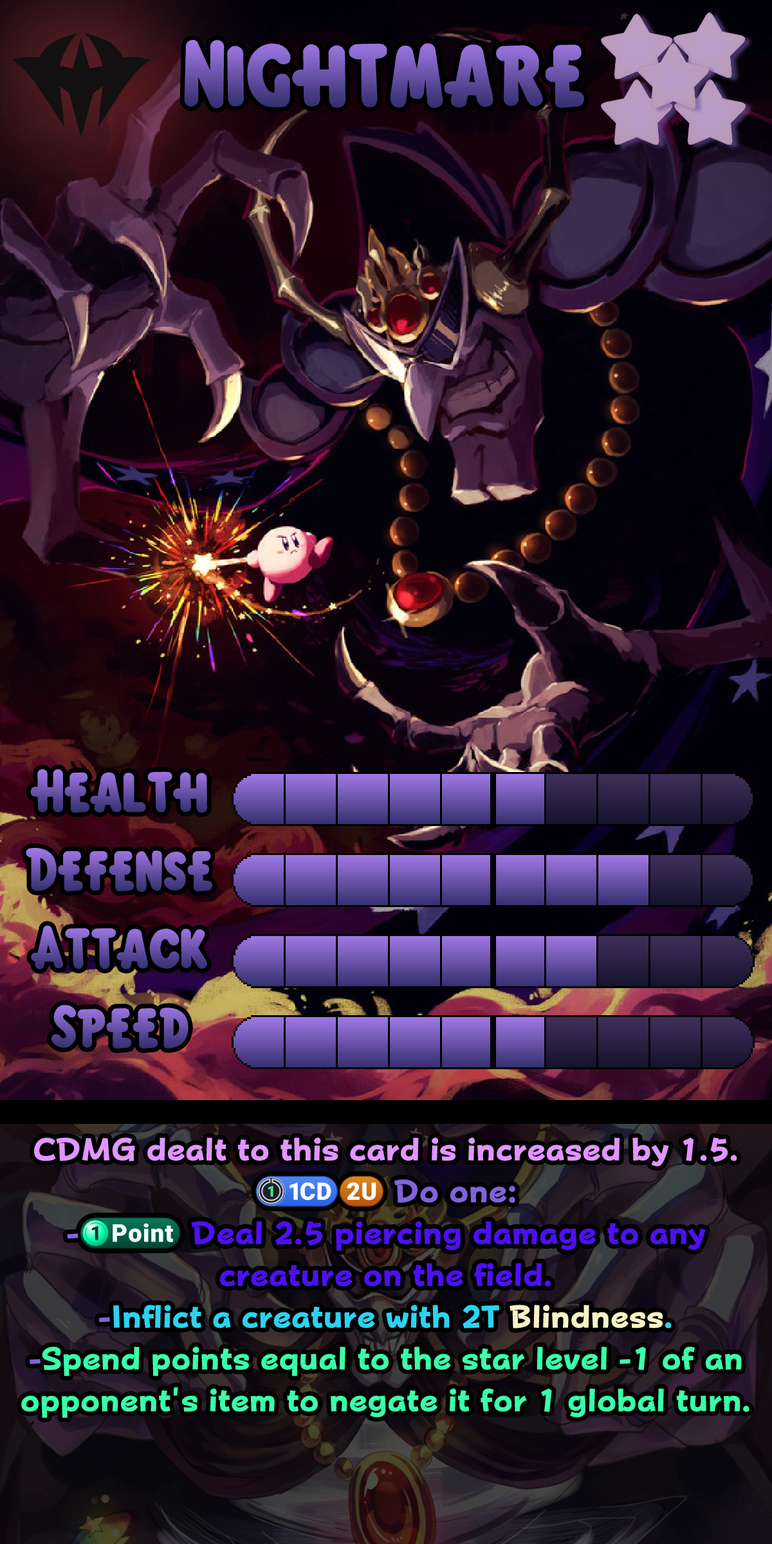
<style>
.page{position:relative;width:772px;height:1544px}
.page>*{position:absolute;margin:0}
.t1{font:145.4px "KirbyClassic"}
.t2{font:92.7px "KirbyClassic"}
.t3{font:54.1px/41.8px "FOT-PopHappinessStd-EB";color:#3bffaa}
.t4{font:54.1px/41.8px "FOT-PopHappinessStd-EB";color:#e096ff}
.t5{font:54.1px/41.8px "stoogedings-Regular";color:#8263da}
.t6{font:54.1px/41.8px "FOT-PopHappinessStd-EB";color:#8263da}
.t7{font:55.2px/41.8px "stoogedings-Regular";color:#4d10f2}
.t8{font:54.1px/41.8px "FOT-PopHappinessStd-EB";color:#4d10f2}
.t9{font:54.1px/41.8px "FOT-PopHappinessStd-EB";color:#2dd2f0}
.t10{font:54.1px/41.8px "FOT-PopHappinessStd-EB";color:#f9f2c2}
</style>
<div class="page">
<p class="t1" style="left:184px;top:40px;width:400px;height:69px">Nightmare</p>
<p class="t2" style="left:30px;top:769px;width:178px;height:44px">Health</p>
<p class="t2" style="left:26px;top:848px;width:186px;height:44px">Defense</p>
<p class="t2" style="left:31px;top:925px;width:176px;height:45px">Attack</p>
<p class="t2" style="left:51px;top:1005px;width:138px;height:44px">Speed</p>
<p class="t3" style="left:21px;top:1138px;width:729px;height:280px;text-align:center"><span class="t4">CDMG dealt to this card is increased by 1.5.<br></span><span class="t5">(1CD)(2U)</span><span class="t6"> Do one:<br>-</span><span class="t7">(1 point)</span><span class="t8"> Deal 2.5 piercing damage to any creature on the field.<br></span><span class="t6">-</span><span class="t9">Inflict a creature with 2T </span><span class="t10">Blindness</span><span class="t9">.<br></span><span class="t6">-</span>Spend points equal to the star level -1 of an opponent's item to negate it for 1 global turn.</p>
</div>
